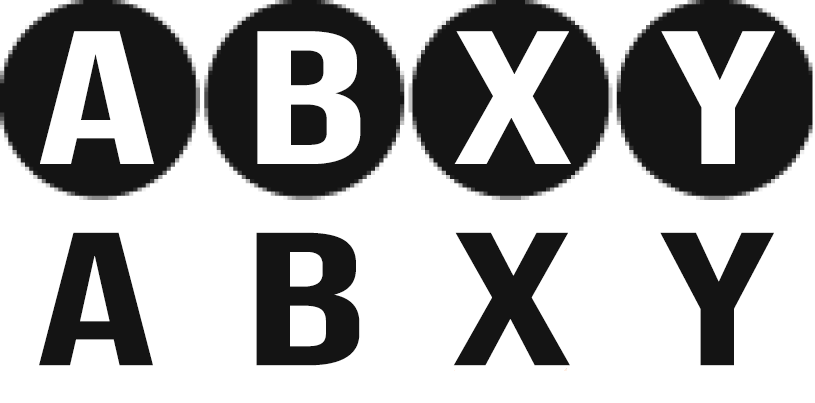
<style>
.page{position:relative;width:815px;height:403px;background:#ffffff}
.page>*{position:absolute;margin:0}
.t1{font:189.5px "BebasNeue-Regular";color:#ffffff;scale:1.59 1}
.t2{font:189px "BebasNeue-Regular";color:#141414;scale:1.6 1}
</style>
<div class="page">
<p class="t1" style="left:40px;top:31px;width:114px;height:133px">A</p>
<p class="t1" style="left:257px;top:31px;width:104px;height:133px">B</p>
<p class="t1" style="left:454px;top:31px;width:117px;height:133px">X</p>
<p class="t1" style="left:661px;top:31px;width:114px;height:133px">Y</p>
<p class="t2" style="left:39px;top:232px;width:114px;height:134px">A</p>
<p class="t2" style="left:256px;top:232px;width:104px;height:134px">B</p>
<p class="t2" style="left:453px;top:232px;width:117px;height:134px">X</p>
<p class="t2" style="left:660px;top:232px;width:114px;height:134px">Y</p>
</div>
